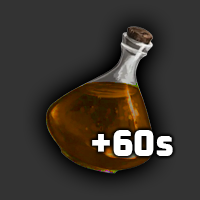
<style>
.page{position:relative;width:200px;height:200px;background:#333333}
.page>*{position:absolute;margin:0}
.t1{font:37.5px "Oxanium-ExtraBold";color:#ffffff}
</style>
<div class="page">
<p class="t1" style="left:92px;top:130px;width:81px;height:26px">+60s</p>
</div>
